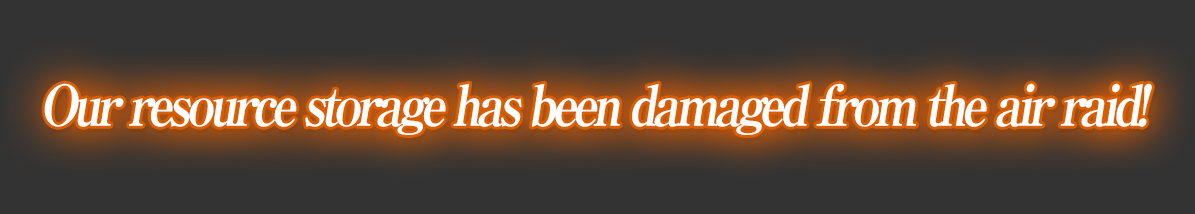
<style>
.page{position:relative;width:1195px;height:214px;background:#333333}
.page>*{position:absolute;margin:0}
.t1{font:56px "RyuminPro-ExBold";letter-spacing:-0.1em;color:#ffffff;font-style:italic;scale:0.9 1}
</style>
<div class="page">
<p class="t1" style="left:44px;top:83px;width:1108px;height:52px">Our resource storage has been damaged from the air raid!</p>
</div>
